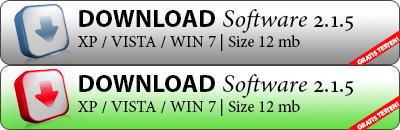
<style>
.page{position:relative;width:400px;height:130px}
.page>*{position:absolute;margin:0}
.t1{font:16.7px "MinionPro-Regular";color:#000000}
.t2{font:25px "MyriadPro-Bold";color:#000000;text-transform:uppercase}
.t3{font:25px "MinionPro-It";color:#000000}
.t4{font:25px "MinionPro-Regular";color:#000000}
.t5{font:6.7px "MyriadPro-Bold";color:#ffffff;text-transform:uppercase}
</style>
<div class="page">
<p class="t1" style="left:78px;top:9px;width:275px;height:42px"><span class="t2">Download </span><span class="t3">Software </span><span class="t4">2.1.5<br></span>XP / VISTA / WIN 7 | Size 12 mb</p>
<p class="t5" style="left:357px;top:36px;width:43px;height:29px;rotate:-32deg">Gratis TESTen!</p>
<p class="t1" style="left:78px;top:74px;width:275px;height:42px"><span class="t2">Download </span><span class="t3">Software </span><span class="t4">2.1.5<br></span>XP / VISTA / WIN 7 | Size 12 mb</p>
<p class="t5" style="left:357px;top:101px;width:43px;height:29px;rotate:-32deg">Gratis TESTen!</p>
</div>
